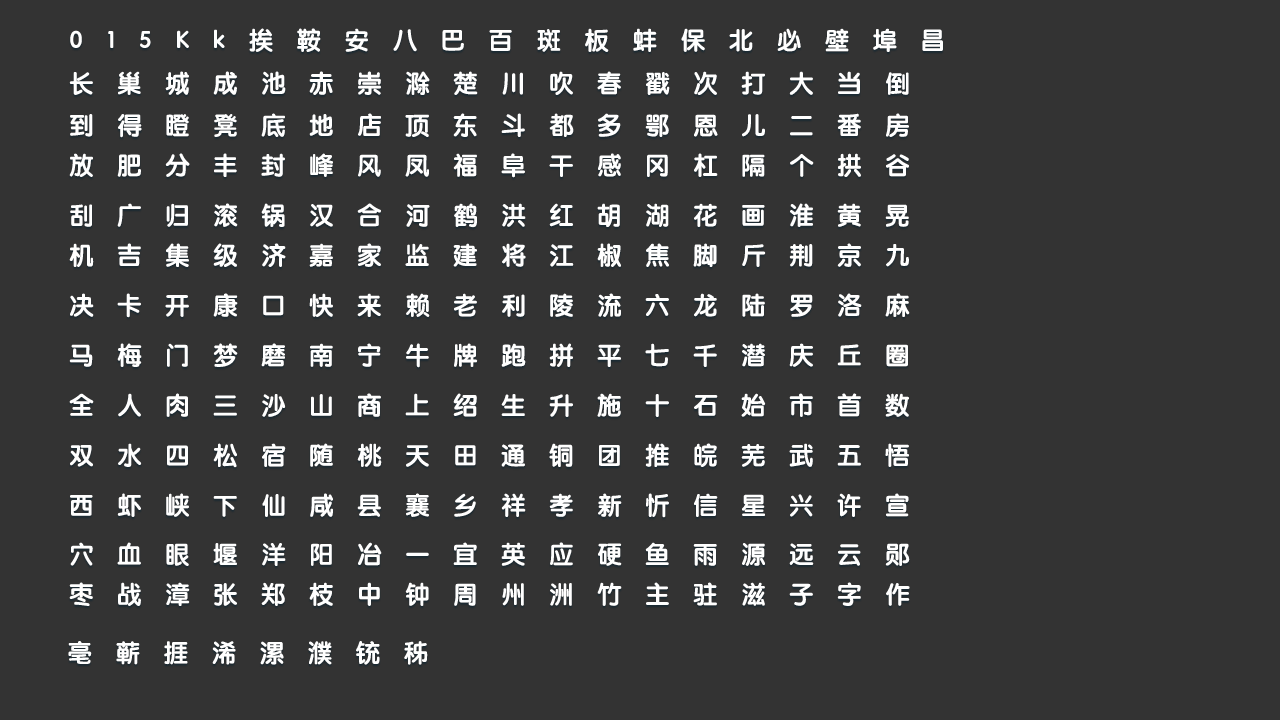
<style>
.page{position:relative;width:1280px;height:720px;background:#333333}
.page>*{position:absolute;margin:0}
.t1{font:24px "STYuanti-SC-Bold";letter-spacing:1em;color:#ffffff}
</style>
<div class="page">
<p class="t1" style="left:70px;top:28px;width:873px;height:24px">015Kk挨鞍安八巴百斑板蚌保北必壁埠昌</p>
<p class="t1" style="left:69px;top:71px;width:840px;height:24px">长巢城成池赤崇滁楚川吹春戳次打大当倒</p>
<p class="t1" style="left:70px;top:113px;width:839px;height:25px">到得瞪凳底地店顶东斗都多鄂恩儿二番房</p>
<p class="t1" style="left:69px;top:153px;width:840px;height:25px">放肥分丰封峰风凤福阜干感冈杠隔个拱谷</p>
<p class="t1" style="left:70px;top:203px;width:839px;height:25px">刮广归滚锅汉合河鹤洪红胡湖花画淮黄晃</p>
<p class="t1" style="left:69px;top:243px;width:840px;height:24px">机吉集级济嘉家监建将江椒焦脚斤荆京九</p>
<p class="t1" style="left:70px;top:293px;width:840px;height:25px">决卡开康口快来赖老利陵流六龙陆罗洛麻</p>
<p class="t1" style="left:69px;top:343px;width:839px;height:25px">马梅门梦磨南宁牛牌跑拼平七千潜庆丘圈</p>
<p class="t1" style="left:69px;top:393px;width:840px;height:24px">全人肉三沙山商上绍生升施十石始市首数</p>
<p class="t1" style="left:70px;top:443px;width:839px;height:25px">双水四松宿随桃天田通铜团推皖芜武五悟</p>
<p class="t1" style="left:70px;top:493px;width:839px;height:25px">西虾峡下仙咸县襄乡祥孝新忻信星兴许宣</p>
<p class="t1" style="left:70px;top:542px;width:840px;height:24px">穴血眼堰洋阳冶一宜英应硬鱼雨源远云郧</p>
<p class="t1" style="left:69px;top:582px;width:841px;height:24px">枣战漳张郑枝中钟周州洲竹主驻滋子字作</p>
<p class="t1" style="left:68px;top:641px;width:360px;height:24px">亳蕲捱浠漯濮铳秭</p>
</div>
